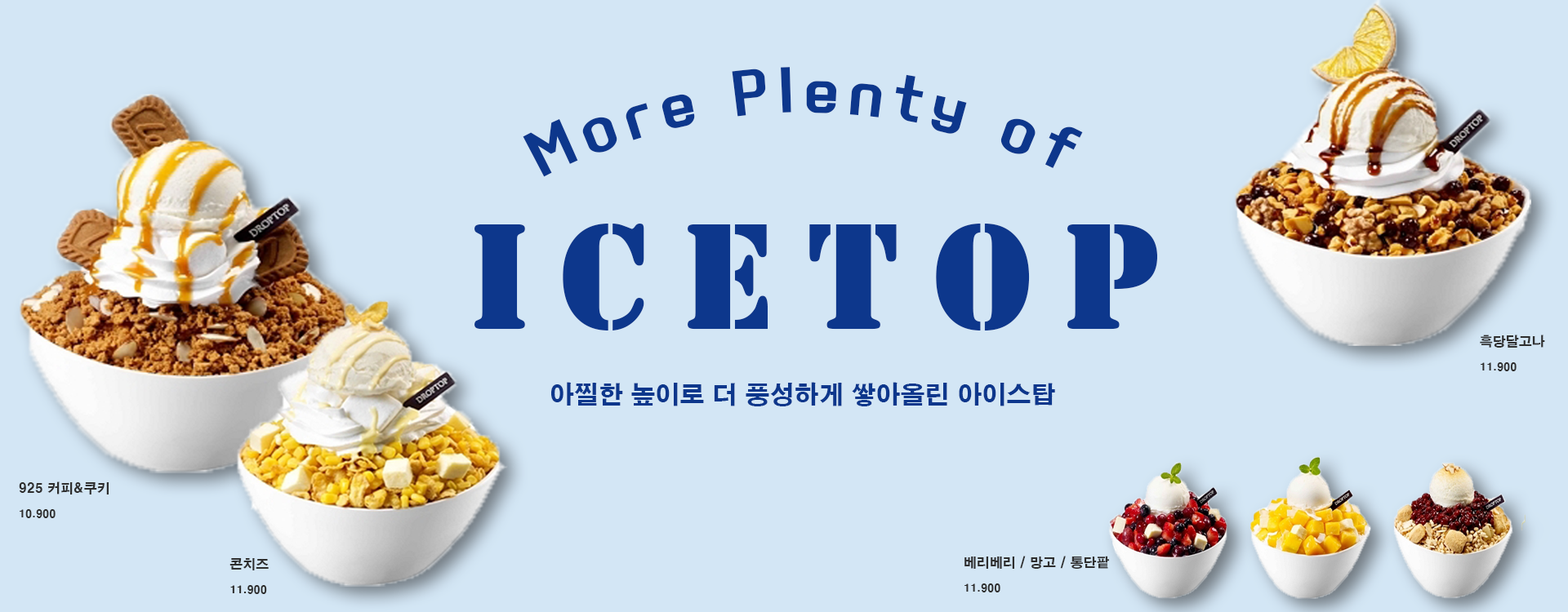
<style>
.page{position:relative;width:1568px;height:612px;background:#d3e6f5}
.page>*{position:absolute;margin:0}
.t1{font:49px "KoreanYNMYT-B";letter-spacing:0.2em;color:#0d378c}
.t2{font:147px "Stencil-BT";letter-spacing:0.2em;color:#0d378c}
.t3{font:10.6px/24.5px "HYgtrE";color:#2e2e2e}
.t4{font:13.1px/24.5px "HYgtrE";color:#2e2e2e}
.t5{font:24.5px "HYgtrE";color:#0d378c}
</style>
<div class="page">
<p class="t1" style="left:523px;top:67px;width:560px;height:110px">More Plenty of</p>
<p class="t2" style="left:474px;top:224px;width:683px;height:107px">ICETOP</p>
<p class="t3" style="left:1480px;top:335px;width:65px;height:37px"><span class="t4">흑당달고나<br></span>11.900</p>
<p class="t5" style="left:551px;top:382px;width:504px;height:25px">아찔한 높이로 더 풍성하게 쌓아올린 아이스탑</p>
<p class="t4" style="left:19px;top:482px;width:90px;height:37px">925 커피&amp;쿠키<br><span class="t3">10.900</span></p>
<p class="t4" style="left:964px;top:556px;width:145px;height:37px">베리베리 / 망고 / 통단팥<br><span class="t3">11.900</span></p>
<p class="t3" style="left:229px;top:559px;width:40px;height:36px"><span class="t4">콘치즈<br></span>11.900</p>
</div>
